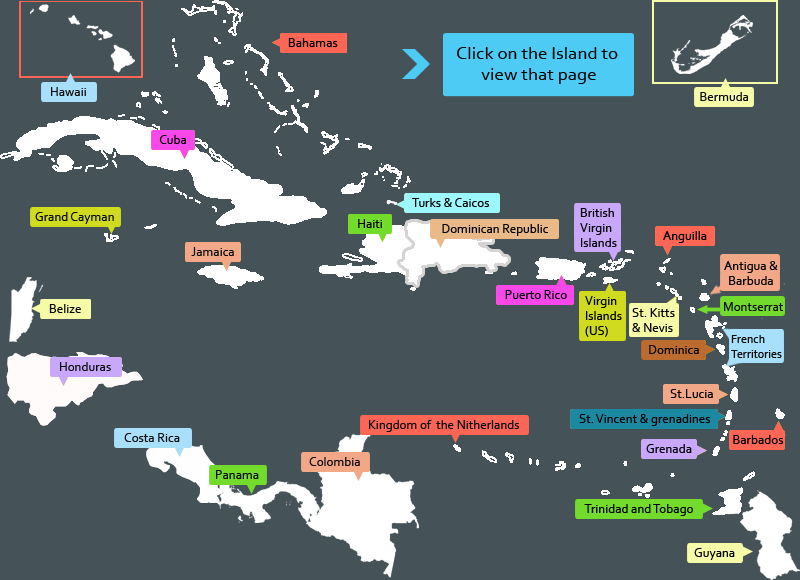
<style>
.page{position:relative;width:800px;height:580px;background:#455258}
.page>*{position:absolute;margin:0}
.t1{font:13px "Corbel";color:#000000}
.t2{font:19px/18px "Corbel";color:#000000}
.t3{font:13px "Corbel";color:#0a0b0b}
.t4{font:13px/12px "Corbel";color:#000000}
.t5{font:12px/12px "Corbel";color:#0a0b0b}
</style>
<div class="page">
<p class="t1" style="left:288px;top:38px;width:50px;height:9px">Bahamas</p>
<p class="t2" style="left:457px;top:47px;width:161px;height:37px;text-align:center">Click on the Island to <br>view that page</p>
<p class="t3" style="left:51px;top:87px;width:35px;height:9px">Hawaii</p>
<p class="t3" style="left:700px;top:92px;width:48px;height:9px">Bermuda</p>
<p class="t1" style="left:159px;top:135px;width:27px;height:9px">Cuba</p>
<p class="t1" style="left:412px;top:198px;width:78px;height:9px">Turks &amp; Caicos</p>
<p class="t4" style="left:580px;top:208px;width:37px;height:39px">British<br>Virgin <br>Islands</p>
<p class="t3" style="left:35px;top:212px;width:79px;height:12px">Grand Cayman</p>
<p class="t1" style="left:358px;top:219px;width:24px;height:9px">Haiti</p>
<p class="t1" style="left:442px;top:224px;width:106px;height:12px">Dominican Republic</p>
<p class="t1" style="left:663px;top:231px;width:44px;height:12px">Anguilla</p>
<p class="t3" style="left:191px;top:247px;width:43px;height:9px">Jamaica</p>
<p class="t4" style="left:724px;top:261px;width:54px;height:24px;text-align:center">Antigua &amp;<br>Barbuda</p>
<p class="t1" style="left:505px;top:290px;width:62px;height:9px">Puerto Rico</p>
<p class="t3" style="left:49px;top:304px;width:32px;height:9px">Belize</p>
<p class="t4" style="left:585px;top:296px;width:37px;height:41px">Virgin <br>Islands<br>(US)</p>
<p class="t3" style="left:724px;top:302px;width:59px;height:9px">Montserrat</p>
<p class="t4" style="left:632px;top:308px;width:43px;height:24px">St. Kitts<br>&amp; Nevis</p>
<p class="t5" style="left:731px;top:335px;width:51px;height:23px">French <br>Territories</p>
<p class="t1" style="left:649px;top:345px;width:50px;height:9px">Dominica</p>
<p class="t3" style="left:60px;top:362px;width:51px;height:9px">Honduras</p>
<p class="t1" style="left:670px;top:389px;width:43px;height:9px">St.Lucia</p>
<p class="t1" style="left:579px;top:414px;width:132px;height:12px">St. Vincent &amp; grenadines</p>
<p class="t3" style="left:369px;top:420px;width:151px;height:12px">Kingdom of  the Nitherlands</p>
<p class="t3" style="left:124px;top:433px;width:56px;height:9px">Costa Rica</p>
<p class="t1" style="left:733px;top:435px;width:51px;height:9px">Barbados</p>
<p class="t1" style="left:646px;top:444px;width:46px;height:9px">Grenada</p>
<p class="t3" style="left:309px;top:457px;width:51px;height:9px">Colombia</p>
<p class="t3" style="left:216px;top:470px;width:43px;height:9px">Panama</p>
<p class="t1" style="left:584px;top:504px;width:109px;height:12px">Trinidad and Tobago</p>
<p class="t1" style="left:694px;top:548px;width:41px;height:12px">Guyana</p>
</div>
